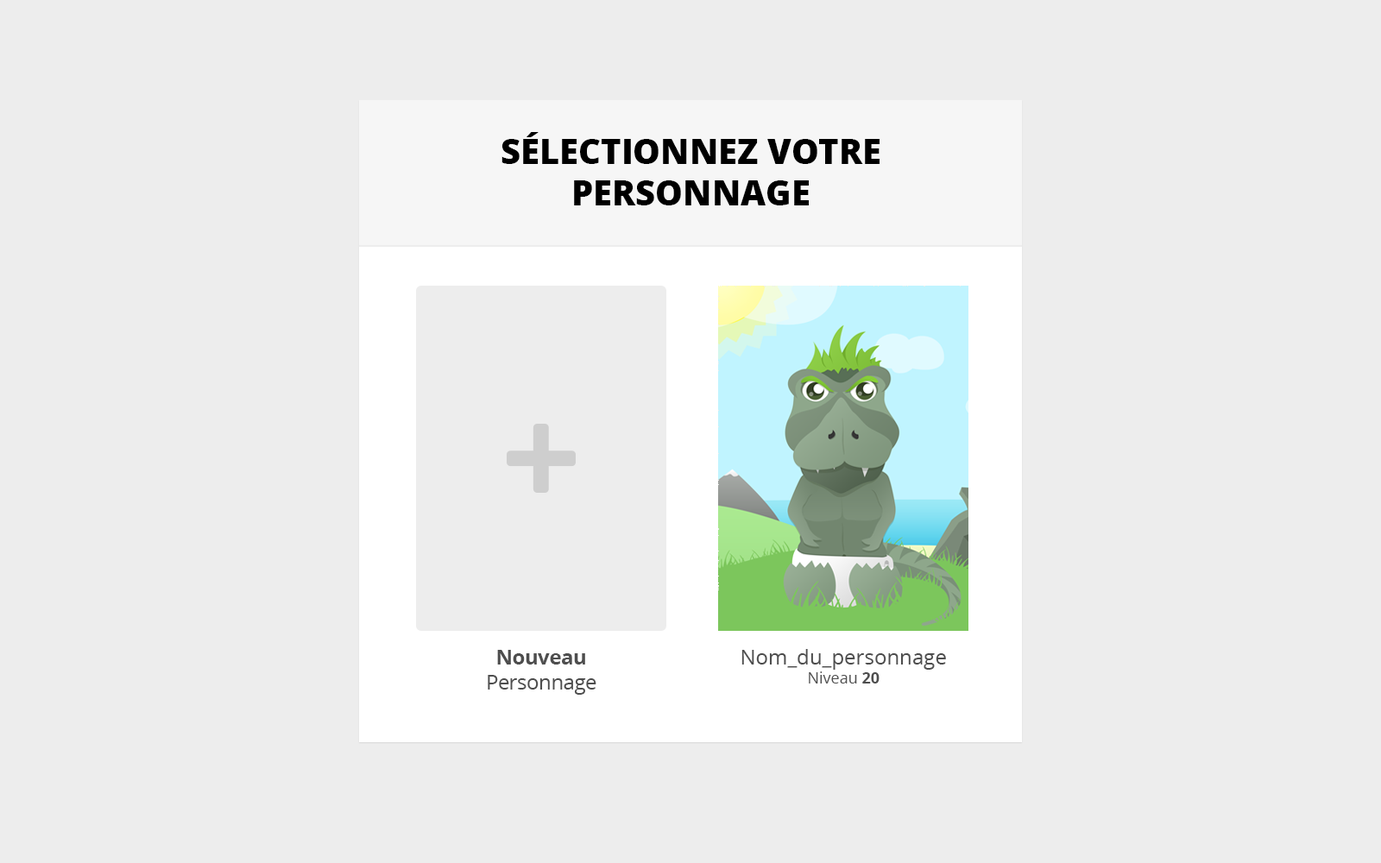
<style>
.page{position:relative;width:1381px;height:863px;background:#ededed}
.page>*{position:absolute;margin:0}
.t1{font:34.5px "OpenSans-Extrabold";color:#000000;text-transform:uppercase}
.t2{font:20.7px "OpenSans";letter-spacing:-0.02em;color:#4f4f4f}
.t3{font:20.7px "OpenSans-Bold";letter-spacing:-0.02em;color:#4f4f4f}
.t4{font:20.7px "OpenSans";color:#4e4e4e}
.t5{font:15.5px "OpenSans";color:#4e4e4e}
.t6{font:15.5px "OpenSans-Bold";color:#4e4e4e}
</style>
<div class="page">
<p class="t1" style="left:502px;top:132px;width:378px;height:73px;text-align:center">Sélectionnez votre<br>persOnnage</p>
<p class="t2" style="left:488px;top:650px;width:109px;height:45px;text-align:center"><span class="t3">Nouveau<br></span>Personnage</p>
<p class="t4" style="left:742px;top:649px;width:204px;height:35px;text-align:center">Nom_du_personnage<br><span class="t5">Niveau </span><span class="t6">20</span></p>
</div>
